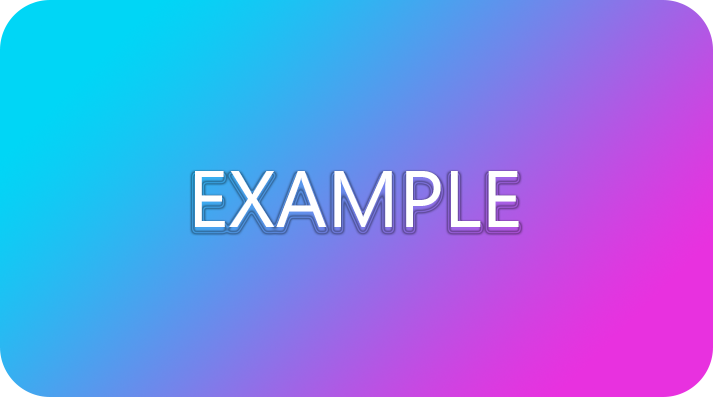
<style>
.page{position:relative;width:713px;height:397px}
.page>*{position:absolute;margin:0}
.t1{font:80px "YuGothicUI-Regular";color:#ffffff}
</style>
<div class="page">
<p class="t1" style="left:195px;top:171px;width:324px;height:56px">EXAMPLE</p>
</div>
